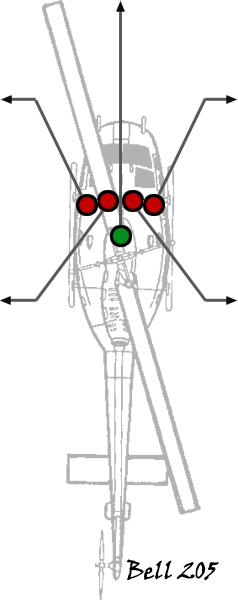
<style>
.page{position:relative;width:238px;height:600px;background:#ffffff}
.page>*{position:absolute;margin:0}
.t1{font:24px "VinerHandITC";color:#000000}
</style>
<div class="page">
<p class="t1" style="left:126px;top:559px;width:93px;height:22px">Bell 205</p>
</div>
